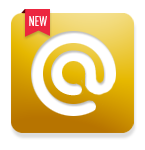
<style>
.page{position:relative;width:145px;height:150px;background:#ffffff}
.page>*{position:absolute;margin:0}
.t1{font:13.3px "Futura-CondensedMedium";letter-spacing:-0.01em;color:#ffffff}
.t2{font:88.1px "Bauhaus93";letter-spacing:-0.01em}
</style>
<div class="page">
<p class="t1" style="left:29px;top:16px;width:18px;height:10px">NEW</p>
<p class="t2" style="left:48px;top:49px;width:45px;height:46px">a</p>
</div>
